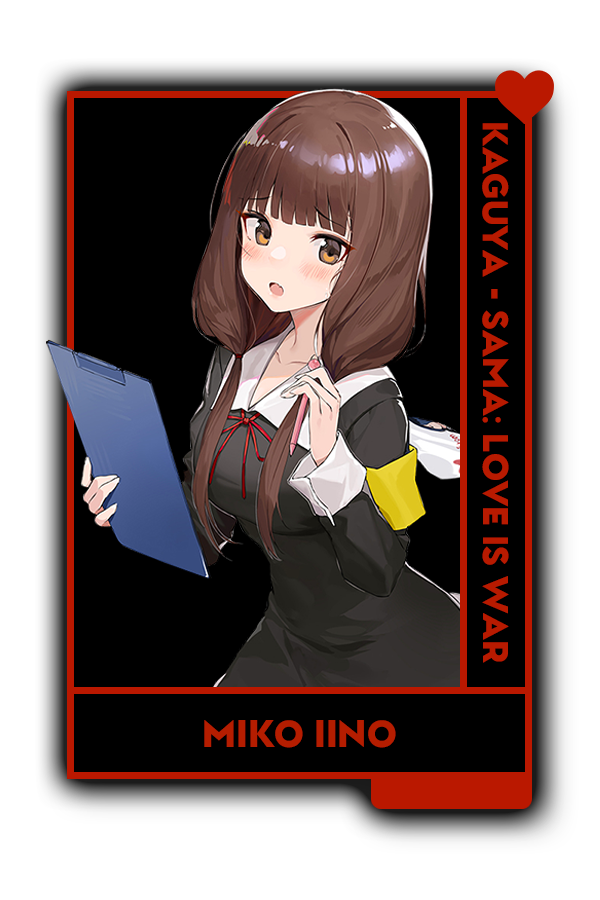
<style>
.page{position:relative;width:600px;height:900px;background:#000000}
.page>*{position:absolute;margin:0}
.t1{font:34px "GarnetCapitalsBlack-Regular";color:#b52616}
.t2{font:35.7px "GarnetCapitalsBlack-Regular";color:#b22818}
</style>
<div class="page">
<p class="t1" style="left:482px;top:123px;width:27px;height:540px;rotate:90deg">Kaguya - Sama: Love is war</p>
<p class="t2" style="left:204px;top:720px;width:192px;height:28px">MIKO IINO</p>
</div>
